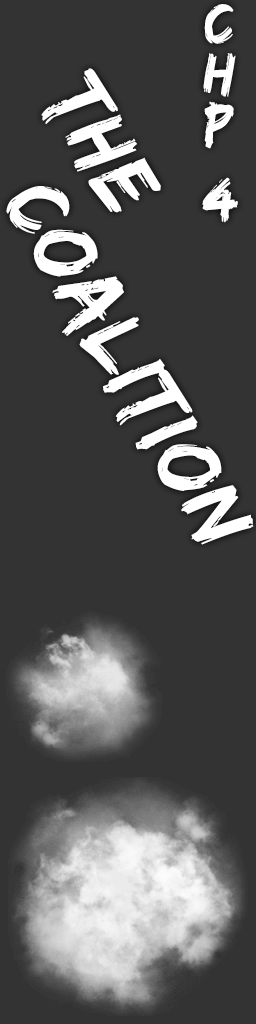
<style>
.page{position:relative;width:256px;height:1024px;background:#333333}
.page>*{position:absolute;margin:0}
.t1{font:60px/25.1px "EdoSZ";letter-spacing:0.03em;color:#ffffff}
.t2{font:91.3px "EdoSZ";letter-spacing:0.03em;color:#ffffff;scale:0.96 1}
</style>
<div class="page">
<p class="t1" style="left:202px;top:4px;width:36px;height:219px;text-align:center">C<br><br>H<br><br>P<br><br><br>4</p>
<p class="t2" style="left:41px;top:68px;width:120px;height:145px;rotate:60deg">The</p>
<p class="t2" style="left:6px;top:186px;width:248px;height:359px;rotate:60deg">Coalition</p>
</div>
